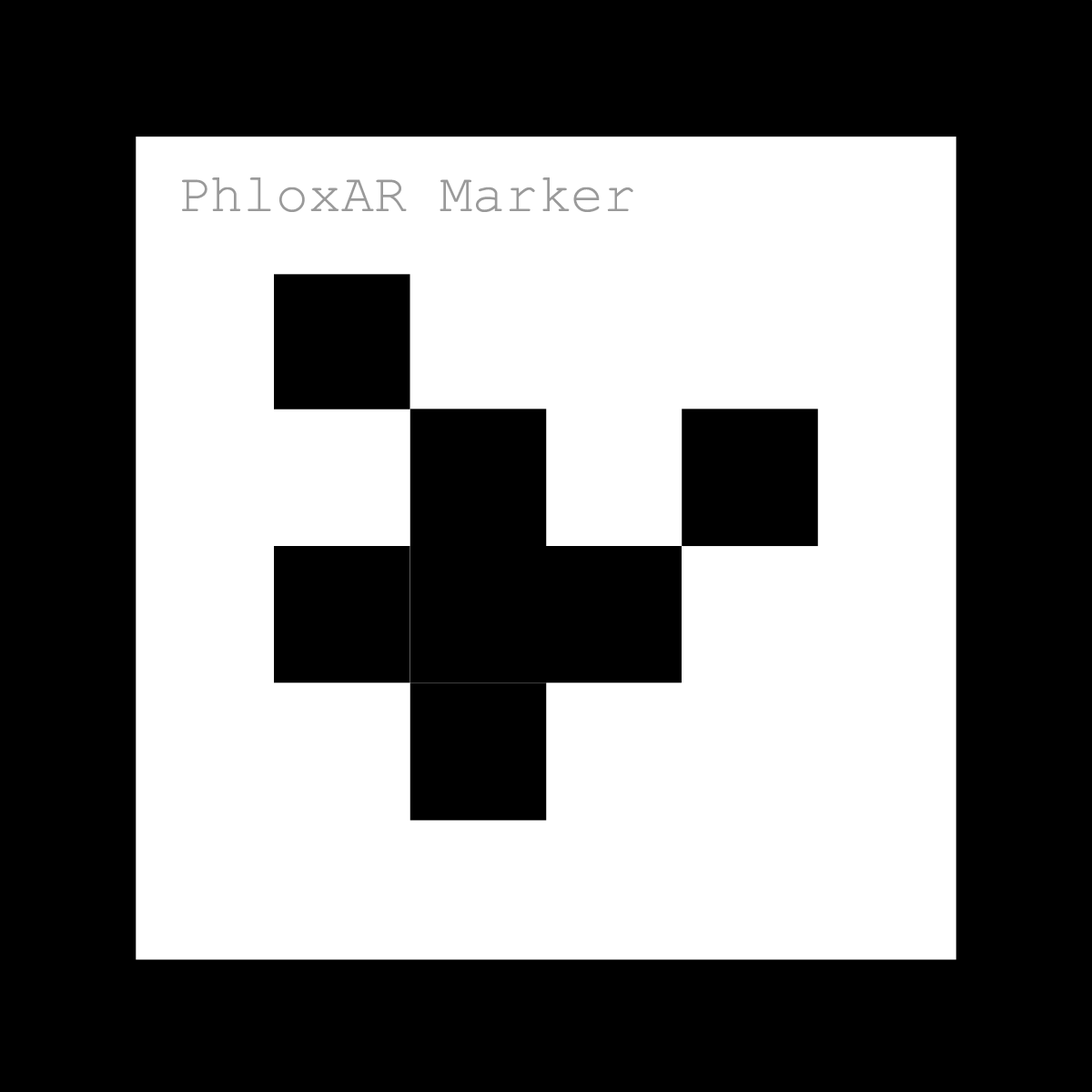
<style>
.page{position:relative;width:1092px;height:1092px;background:#000000}
.page>*{position:absolute;margin:0}
.t1{font:54.6px "CourierNewPSMT";color:#9a9a9a}
</style>
<div class="page">
<p class="t1" style="left:182px;top:177px;width:451px;height:35px">PhloxAR Marker</p>
</div>
